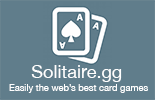
<style>
.page{position:relative;width:155px;height:100px;background:#607d8b}
.page>*{position:absolute;margin:0}
.t1{font:18.1px "HelveticaNeue";color:#ffffff}
.t2{font:9.3px "HelveticaNeue";color:#ffffff}
</style>
<div class="page">
<p class="t1" style="left:31px;top:65px;width:91px;height:17px">Solitaire.gg</p>
<p class="t2" style="left:9px;top:84px;width:139px;height:9px">Easily the web’s best card games</p>
</div>
